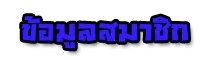
<style>
.page{position:relative;width:206px;height:60px;background:#ffffff}
.page>*{position:absolute;margin:0}
.t1{font:36px "-LayijiTaMaiTine1";color:#361bff}
</style>
<div class="page">
<p class="t1" style="left:22px;top:16px;width:166px;height:33px">ข้อมูลสมาชิก</p>
</div>
